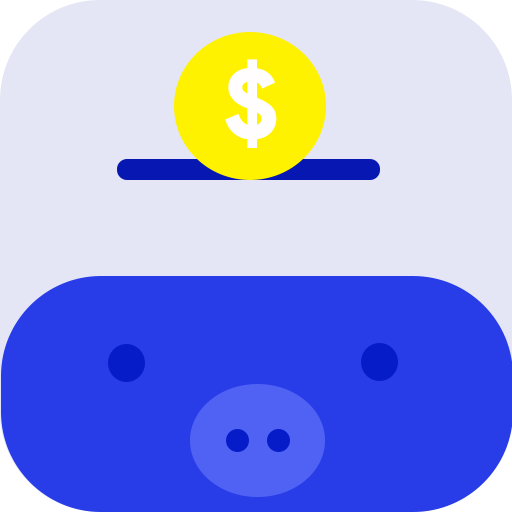
<style>
.page{position:relative;width:512px;height:512px;background:#e4e6f5}
.page>*{position:absolute;margin:0}
.t1{font:100px "ProductSans-Black";color:#fffdfd}
</style>
<div class="page">
<p class="t1" style="left:225px;top:59px;width:52px;height:89px">$</p>
</div>
